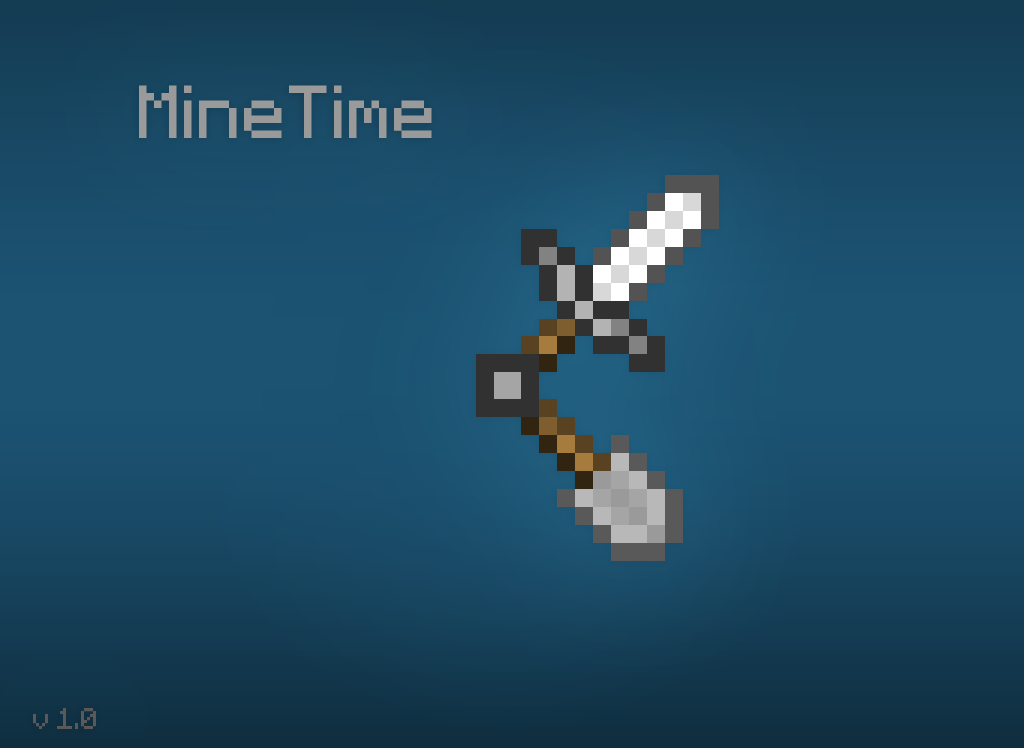
<style>
.page{position:relative;width:1024px;height:748px}
.page>*{position:absolute;margin:0}
.t1{font:60px "Minecraft";color:#9a9a9a}
.t2{font:24px "Minecraft";color:#595959}
</style>
<div class="page">
<p class="t1" style="left:139px;top:85px;width:293px;height:53px">MineTime</p>
<p class="t2" style="left:33px;top:708px;width:63px;height:21px">v 1.0</p>
</div>
